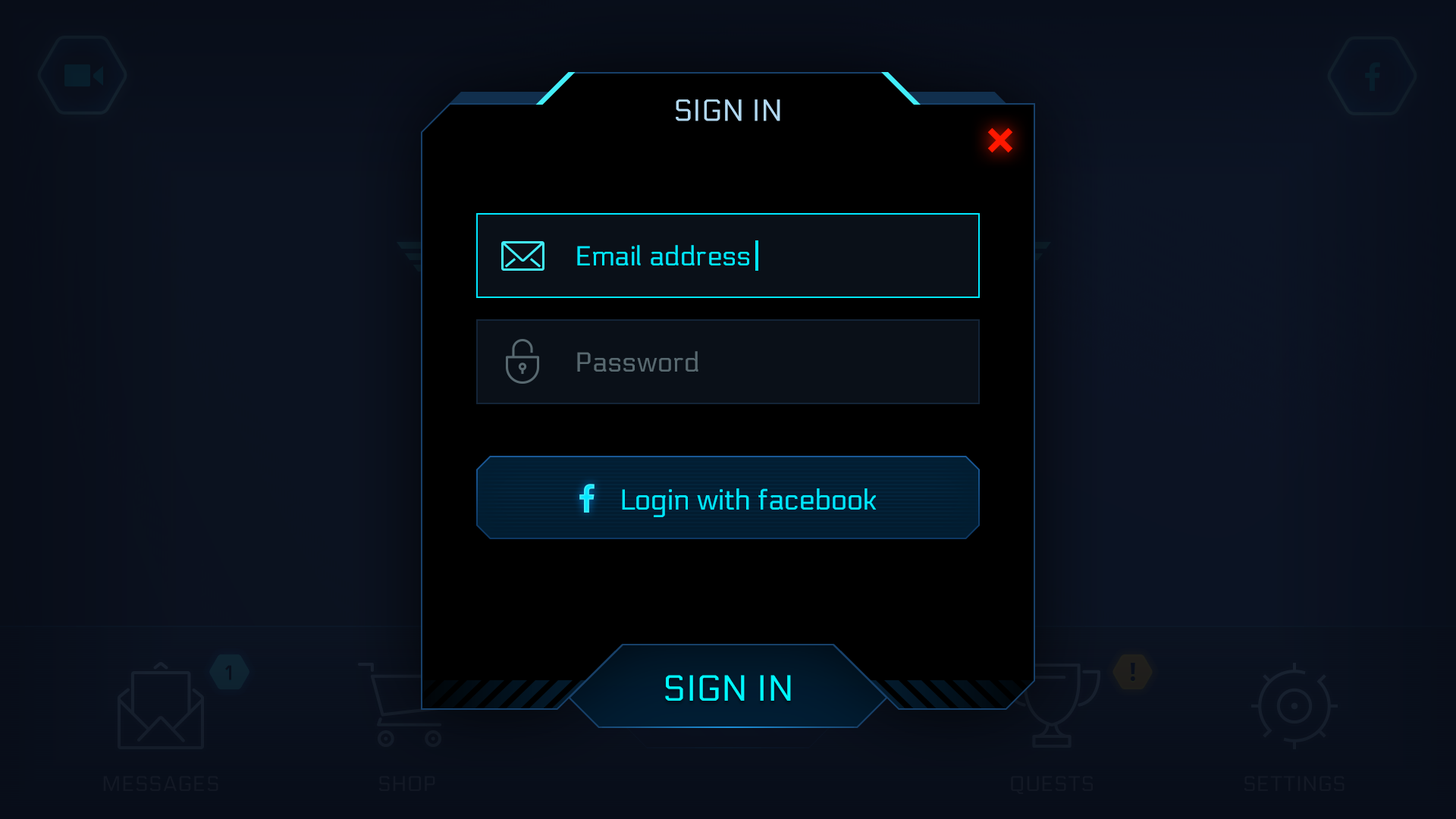
<style>
.page{position:relative;width:1456px;height:819px}
.page>*{position:absolute;margin:0}
.t1{font:30.3px "Electrolize-Regular";color:#b1d8f1;text-transform:uppercase}
.t2{font:27.3px "Electrolize-Regular";color:#00e7ff}
.t3{font:27.3px "Electrolize-Regular";color:#586970}
.t4{font:28.8px "Electrolize-Regular";color:#00e7ff}
.t5{font:36.4px "Electrolize-Regular";color:#00f7ff;text-transform:uppercase}
</style>
<div class="page">
<p class="t1" style="left:676px;top:99px;width:104px;height:22px">SIGN IN</p>
<p class="t2" style="left:577px;top:245px;width:172px;height:20px">Email address</p>
<p class="t3" style="left:577px;top:351px;width:121px;height:21px">Password</p>
<p class="t4" style="left:622px;top:488px;width:255px;height:29px">Login with facebook</p>
<p class="t5" style="left:665px;top:675px;width:126px;height:26px">sign in</p>
</div>
